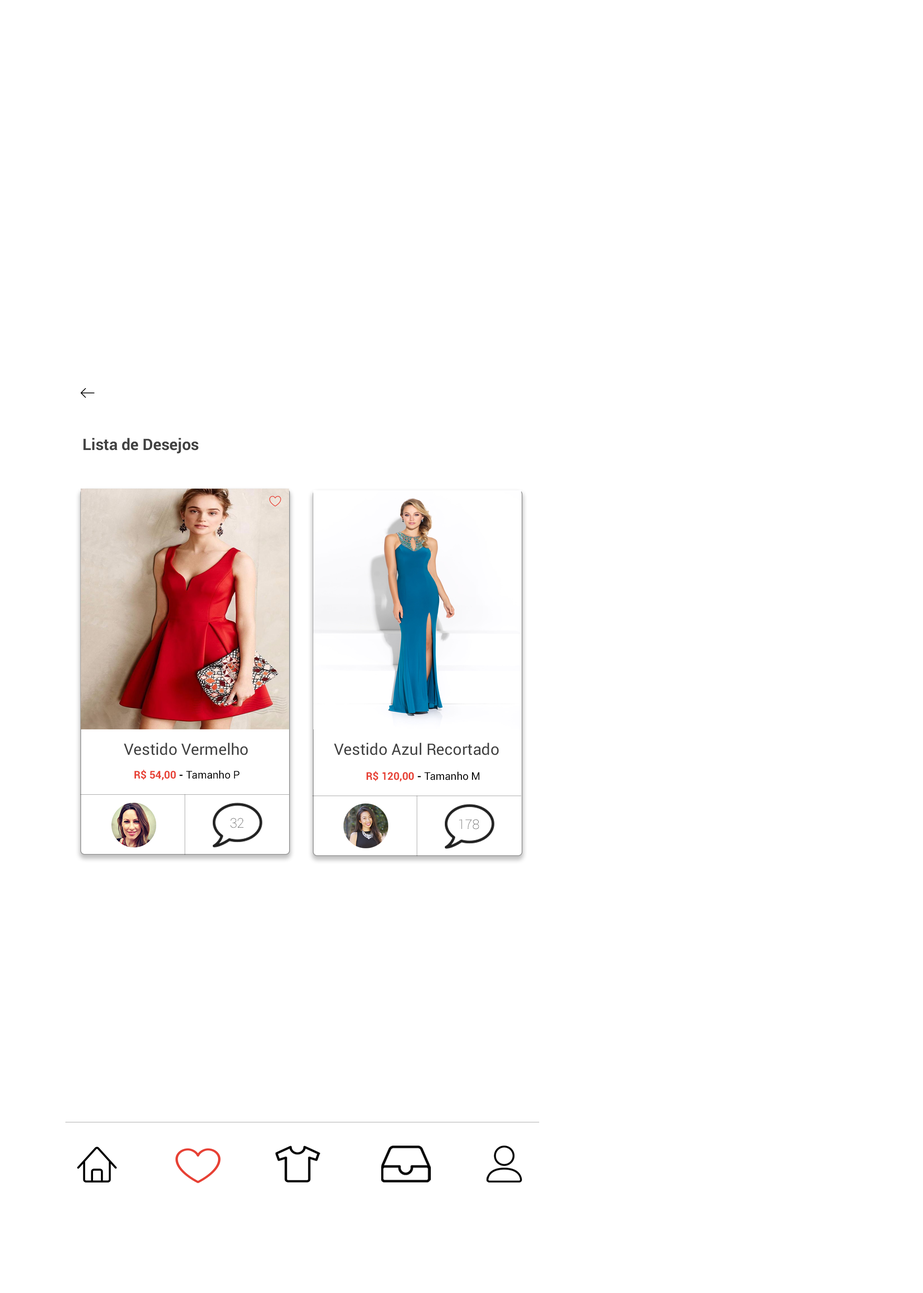
<style>
.page{position:relative;width:923px;height:1293px;background:#ffffff}
.page>*{position:absolute;margin:0}
.t1{font:15.8px "Roboto-Bold";color:#424242}
.t2{font:15.8px "Roboto-Regular";color:#424242}
.t3{font:10.5px "Roboto-Regular";color:#000000}
.t4{font:10.5px "Roboto-Bold";color:#e74135}
.t5{font:10.5px "Roboto-Bold";color:#000000}
.t6{font:13.2px "Roboto-Thin"}
</style>
<div class="page">
<p class="t1" style="left:83px;top:438px;width:116px;height:15px">Lista de Desejos</p>
<p class="t2" style="left:124px;top:742px;width:124px;height:13px">Vestido Vermelho</p>
<p class="t2" style="left:334px;top:742px;width:165px;height:13px">Vestido Azul Recortado</p>
<p class="t3" style="left:134px;top:769px;width:105px;height:11px"><span class="t4">R$ 54,00 </span><span class="t5">- </span>Tamanho P</p>
<p class="t4" style="left:366px;top:771px;width:113px;height:10px">R$ 120,00 <span class="t5">- </span><span class="t3">Tamanho M</span></p>
<p class="t6" style="left:230px;top:818px;width:13px;height:10px">32</p>
<p class="t6" style="left:459px;top:819px;width:20px;height:10px">178</p>
</div>
